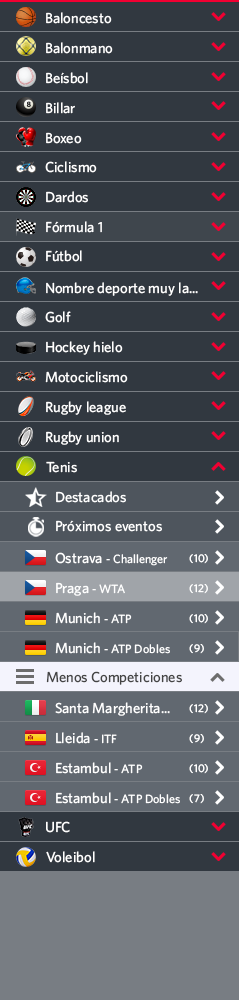
<style>
.page{position:relative;width:239px;height:1000px;background:#313840}
.page>*{position:absolute;margin:0}
.t1{font:14.5px "Whitney-Medium";color:#ffffff}
.t2{font:12px "Whitney-Medium";color:#ffffff}
.t3{font:11px "Whitney-Medium";color:#ffffff}
.t4{font:14.5px "Whitney-Medium";color:#444444}
</style>
<div class="page">
<p class="t1" style="left:46px;top:12px;width:66px;height:12px">Baloncesto</p>
<p class="t1" style="left:46px;top:42px;width:67px;height:12px">Balonmano</p>
<p class="t1" style="left:46px;top:72px;width:42px;height:12px">Beísbol</p>
<p class="t1" style="left:46px;top:102px;width:29px;height:12px">Billar</p>
<p class="t1" style="left:46px;top:132px;width:36px;height:12px">Boxeo</p>
<p class="t1" style="left:45px;top:161px;width:52px;height:12px">Ciclismo</p>
<p class="t1" style="left:46px;top:191px;width:42px;height:12px">Dardos</p>
<p class="t1" style="left:46px;top:221px;width:56px;height:12px">Fórmula 1</p>
<p class="t1" style="left:46px;top:250px;width:36px;height:12px">Fútbol</p>
<p class="t1" style="left:46px;top:282px;width:152px;height:14px">Nombre deporte muy la...</p>
<p class="t1" style="left:45px;top:311px;width:26px;height:12px">Golf</p>
<p class="t1" style="left:46px;top:341px;width:77px;height:14px">Hockey hielo</p>
<p class="t1" style="left:45px;top:371px;width:83px;height:12px">Motociclismo</p>
<p class="t1" style="left:46px;top:401px;width:80px;height:14px">Rugby league</p>
<p class="t1" style="left:46px;top:431px;width:73px;height:14px">Rugby union</p>
<p class="t1" style="left:46px;top:461px;width:31px;height:12px">Tenis</p>
<p class="t1" style="left:56px;top:491px;width:70px;height:12px">Destacados</p>
<p class="t1" style="left:56px;top:520px;width:106px;height:12px">Próximos eventos</p>
<p class="t2" style="left:55px;top:552px;width:113px;height:14px"><span class="t1">Ostrava </span>- Challenger</p>
<p class="t3" style="left:189px;top:554px;width:19px;height:10px">(10)</p>
<p class="t1" style="left:56px;top:582px;width:69px;height:14px">Praga <span class="t2">- WTA</span></p>
<p class="t3" style="left:189px;top:584px;width:19px;height:10px">(12)</p>
<p class="t1" style="left:55px;top:612px;width:77px;height:12px">Munich <span class="t2">- ATP</span></p>
<p class="t3" style="left:189px;top:614px;width:19px;height:10px">(10)</p>
<p class="t2" style="left:55px;top:642px;width:115px;height:12px"><span class="t1">Munich </span>- ATP Dobles</p>
<p class="t3" style="left:189px;top:644px;width:15px;height:10px">(9)</p>
<p class="t4" style="left:46px;top:671px;width:136px;height:14px">Menos Competiciones</p>
<p class="t1" style="left:55px;top:702px;width:115px;height:14px">Santa Margherita...</p>
<p class="t3" style="left:189px;top:704px;width:19px;height:10px">(12)</p>
<p class="t1" style="left:56px;top:732px;width:61px;height:12px">Lleida <span class="t2">- ITF</span></p>
<p class="t3" style="left:189px;top:734px;width:15px;height:10px">(9)</p>
<p class="t1" style="left:56px;top:762px;width:87px;height:12px">Estambul <span class="t2">- ATP</span></p>
<p class="t3" style="left:189px;top:764px;width:19px;height:10px">(10)</p>
<p class="t2" style="left:56px;top:792px;width:124px;height:12px"><span class="t1">Estambul </span>- ATP Dobles</p>
<p class="t3" style="left:189px;top:794px;width:15px;height:10px">(7)</p>
<p class="t1" style="left:46px;top:821px;width:24px;height:12px">UFC</p>
<p class="t1" style="left:46px;top:851px;width:49px;height:12px">Voleibol</p>
</div>
